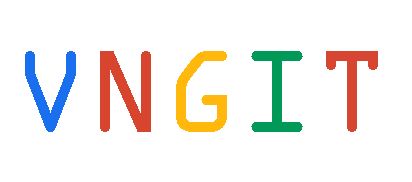
<style>
.page{position:relative;width:412px;height:182px;background:#ffffff}
.page>*{position:absolute;margin:0}
.t1{font:104.6px "OCRAStd";color:#1a6fef}
.t2{font:104.6px "OCRAStd";color:#d7452f}
.t3{font:104.6px "OCRAStd";color:#ffb80b}
.t4{font:104.6px "OCRAStd";color:#009957}
.t5{font:104.6px "OCRAStd";color:#d74631}
</style>
<div class="page">
<p class="t1" style="left:25px;top:51px;width:353px;height:81px">V<span class="t2">N</span><span class="t3">G</span><span class="t4">I</span><span class="t5">T</span></p>
</div>
